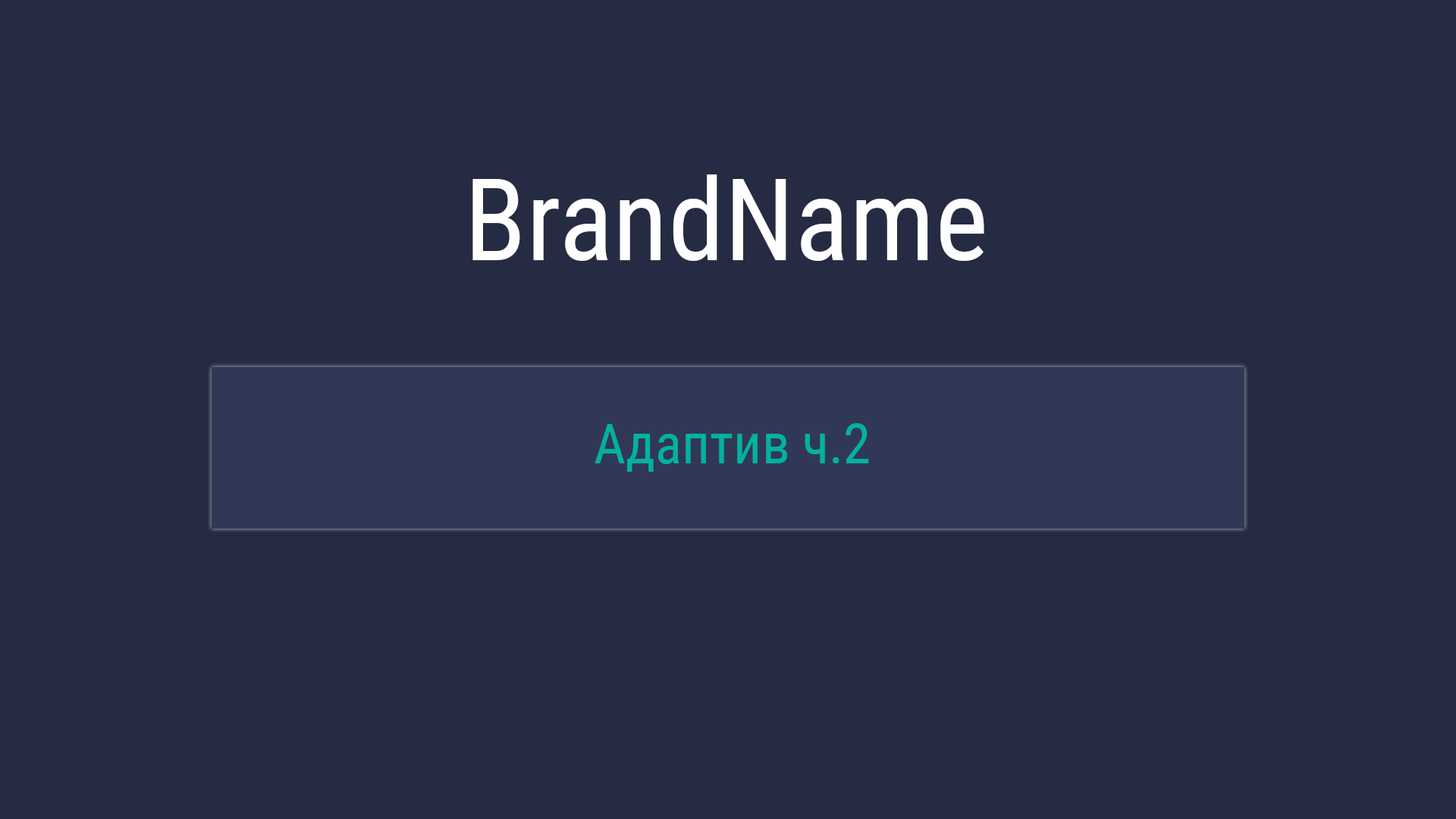
<style>
.page{position:relative;width:1456px;height:819px;background:#252b42}
.page>*{position:absolute;margin:0}
.t1{font:113.7px "RobotoCondensed-Regular";color:#ffffff}
.t2{font:55.4px "RobotoCondensed-Regular";color:#00b2a0}
</style>
<div class="page">
<p class="t1" style="left:472px;top:174px;width:512px;height:87px">BrandName</p>
<p class="t2" style="left:595px;top:423px;width:274px;height:49px">Адаптив ч.2</p>
</div>
